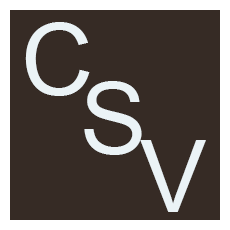
<style>
.page{position:relative;width:230px;height:230px;background:#362b25}
.page>*{position:absolute;margin:0}
.t1{font:100px "ArialMT";color:#ebf3f6}
</style>
<div class="page">
<p class="t1" style="left:25px;top:22px;width:65px;height:74px">C</p>
<p class="t1" style="left:84px;top:81px;width:58px;height:74px">S</p>
<p class="t1" style="left:140px;top:140px;width:66px;height:72px">V</p>
</div>
